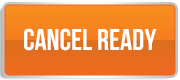
<style>
.page{position:relative;width:180px;height:80px}
.page>*{position:absolute;margin:0}
.t1{font:30px "UTM-Bebas";color:#ffffff}
</style>
<div class="page">
<p class="t1" style="left:24px;top:28px;width:133px;height:23px">cancel ready</p>
</div>
